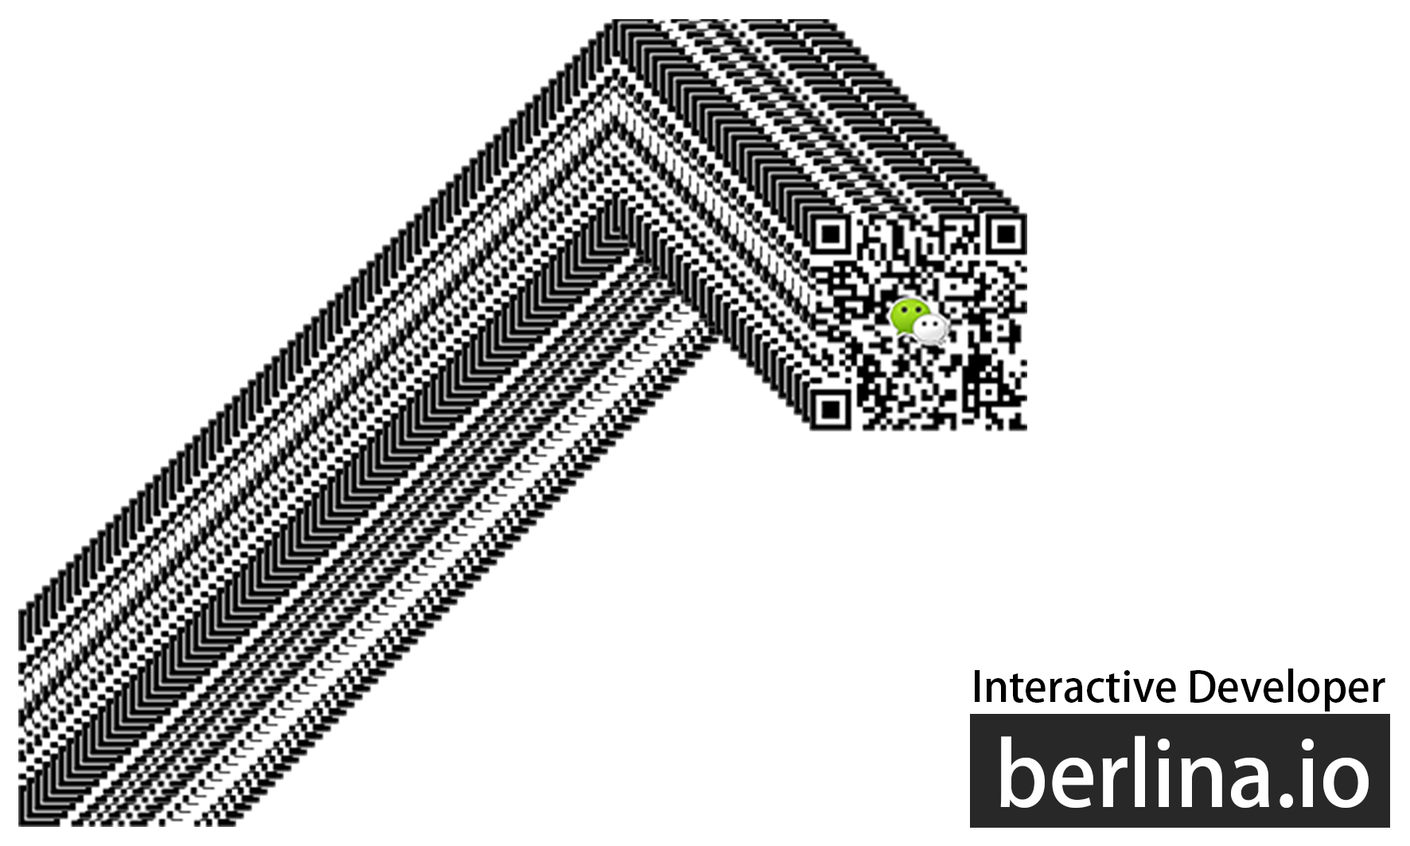
<style>
.page{position:relative;width:1410px;height:846px;background:#ffffff}
.page>*{position:absolute;margin:0}
.t1{font:41.7px "AdobeHeitiStd-Regular";color:#000000}
.t2{font:88.4px "AdobeHeitiStd-Regular";color:#ffffff}
</style>
<div class="page">
<p class="t1" style="left:975px;top:668px;width:410px;height:43px">Interactive Developer</p>
<p class="t2" style="left:1000px;top:735px;width:369px;height:73px">berlina.io</p>
</div>
